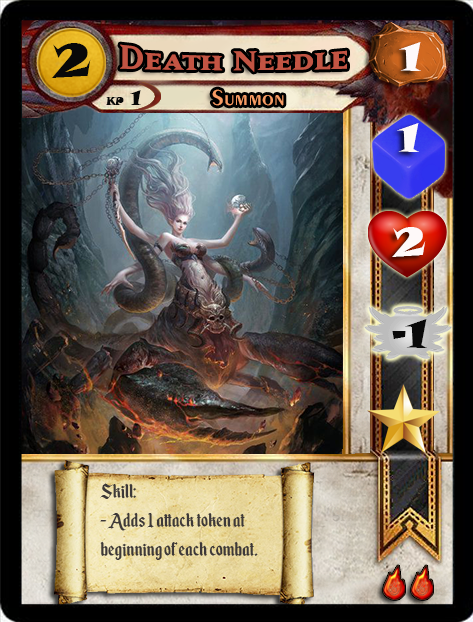
<style>
.page{position:relative;width:473px;height:622px}
.page>*{position:absolute;margin:0}
.t1{font:46.6px "SnapITC-Regular";color:#090909;scale:1.05 1}
.t2{font:40px "MatrixBoldSmallCaps";color:#c25443;scale:1.06 1}
.t3{font:40px "SnapITC-Regular";color:#fef9f9;scale:1.05 1}
.t4{font:22.7px "Exotic350BT-DemiBold";color:#f89c64;scale:1.06 1}
.t5{font:20.5px "SnapITC-Regular";color:#090909}
.t6{font:40px "SnapITC-Regular";color:#090909;scale:1.05 1}
.t7{font:24px "EnchantedLand";color:#3e3939}
</style>
<div class="page">
<p class="t1" style="left:51px;top:43px;width:40px;height:35px">2</p>
<p class="t2" style="left:120px;top:44px;width:227px;height:28px">Death Needle</p>
<p class="t3" style="left:399px;top:42px;width:22px;height:29px">1</p>
<p class="t4" style="left:212px;top:89px;width:72px;height:17px">Summon</p>
<p class="t5" style="left:130px;top:90px;width:11px;height:15px">1</p>
<p class="t3" style="left:397px;top:123px;width:22px;height:29px">1</p>
<p class="t3" style="left:392px;top:227px;width:34px;height:30px">2</p>
<p class="t6" style="left:392px;top:319px;width:35px;height:29px">-1</p>
<p class="t7" style="left:100px;top:483px;width:158px;height:77px">Skill:<br>- Adds 1 attack token at beginning of each combat.</p>
</div>
